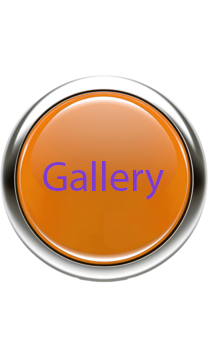
<style>
.page{position:relative;width:208px;height:360px;background:#ffffff}
.page>*{position:absolute;margin:0}
.t1{font:42px "MyriadPro-Regular";color:#7c3cd2}
</style>
<div class="page">
<p class="t1" style="left:43px;top:161px;width:121px;height:39px">Gallery</p>
</div>
